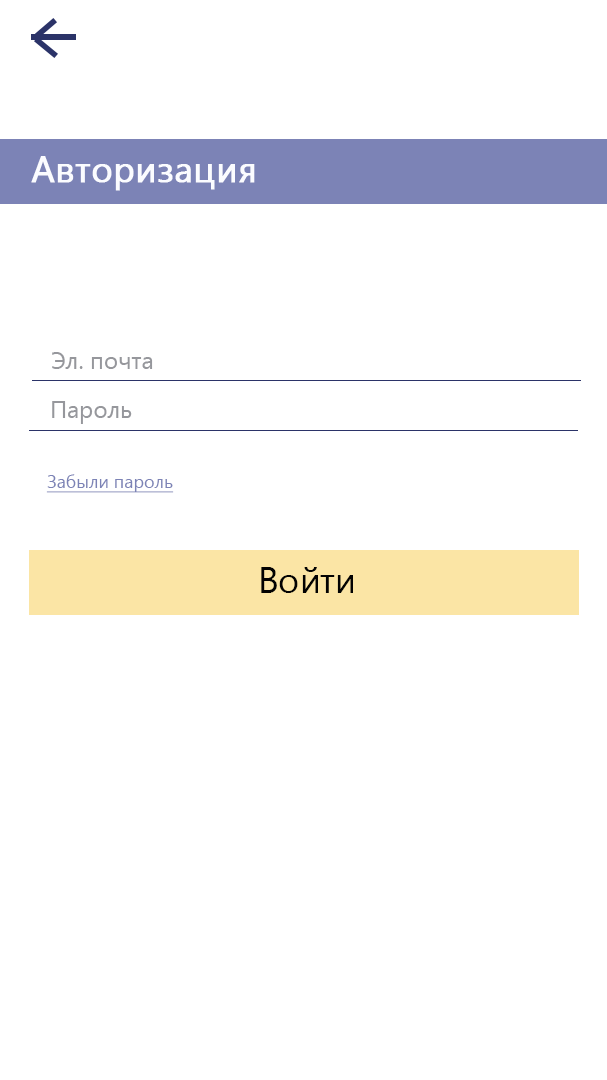
<style>
.page{position:relative;width:607px;height:1080px;background:#ffffff}
.page>*{position:absolute;margin:0}
.t1{font:36px "YuGothicUI-Regular";color:#fbfcff;font-weight:bold}
.t2{font:24px "YuGothicUI-Regular";color:#96979c}
.t3{font:18px "YuGothicUI-Regular";color:#7c83b6;text-decoration:underline}
.t4{font:36px "YuGothicUI-Regular";color:#020202}
</style>
<div class="page">
<p class="t1" style="left:31px;top:156px;width:224px;height:35px">Авторизация</p>
<p class="t2" style="left:52px;top:352px;width:101px;height:17px">Эл. почта</p>
<p class="t2" style="left:52px;top:401px;width:80px;height:23px">Пароль</p>
<p class="t3" style="left:46px;top:474px;width:128px;height:19px">Забыли пароль</p>
<p class="t4" style="left:261px;top:567px;width:92px;height:26px">Войти</p>
</div>
